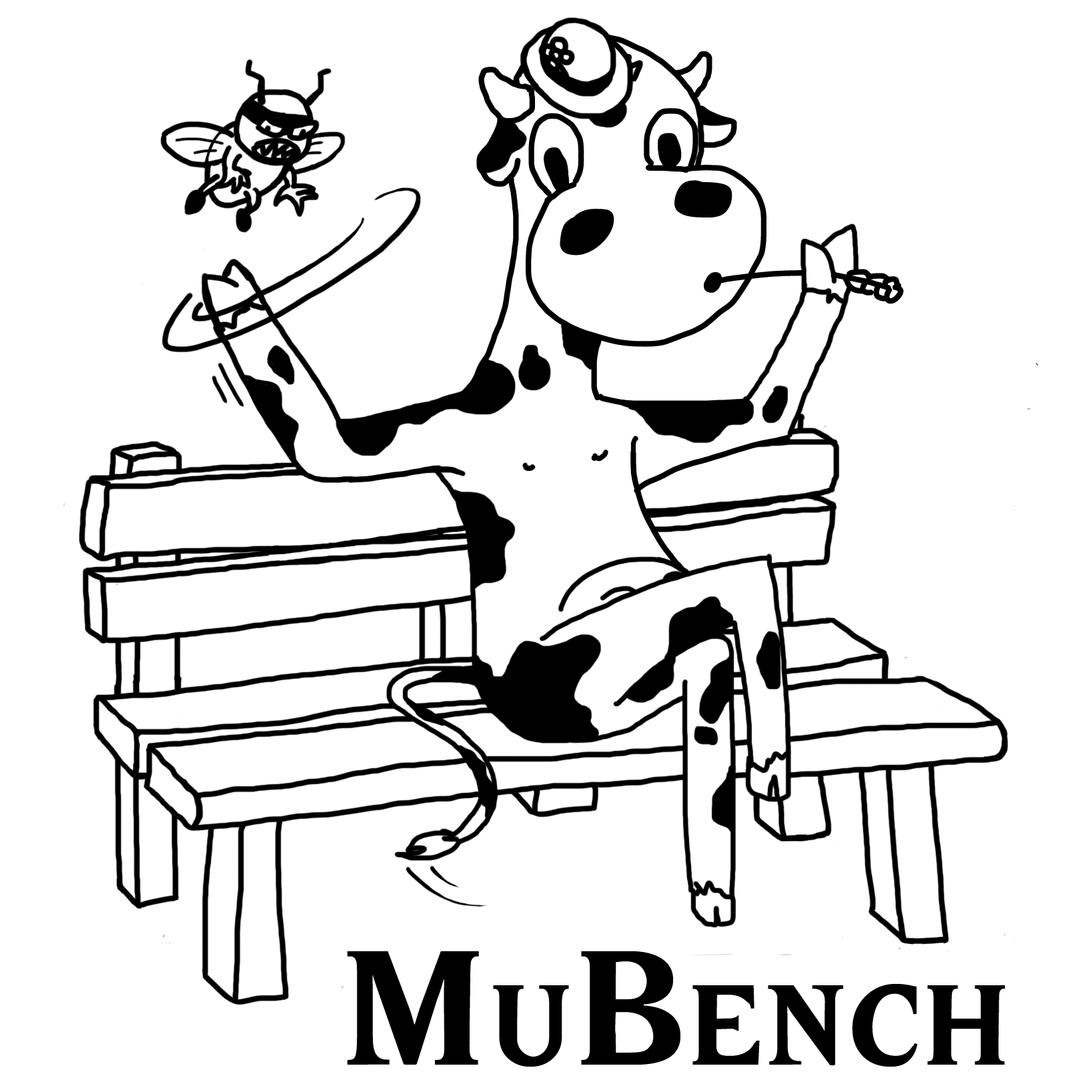
<style>
.page{position:relative;width:1092px;height:1092px;background:#ffffff}
.page>*{position:absolute;margin:0}
.t1{font:166.8px "Ghostbusters";color:#000000;font-variant:small-caps}
</style>
<div class="page">
<p class="t1" style="left:347px;top:951px;width:658px;height:116px">MuBench</p>
</div>
